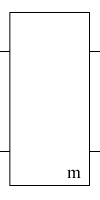
<style>
.page{position:relative;width:100px;height:200px;background:#ffffff}
.page>*{position:absolute;margin:0}
.t1{font:18px "TimesNewRomanPSMT";color:#000000}
</style>
<div class="page">
<p class="t1" style="left:67px;top:169px;width:14px;height:9px">m</p>
</div>
